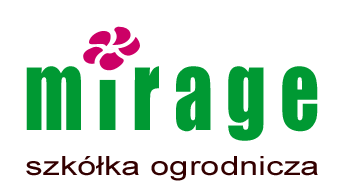
<style>
.page{position:relative;width:339px;height:188px;background:#ffffff}
.page>*{position:absolute;margin:0}
.t1{font:96.6px "Impact";color:#009933;scale:0.8 1}
.t2{font:26.4px "ArialMT";color:#330000;scale:1.31 1}
</style>
<div class="page">
<p class="t1" style="left:26px;top:53px;width:292px;height:88px">m i r a g e</p>
<p class="t2" style="left:26px;top:156px;width:292px;height:25px">szkółka ogrodnicza</p>
</div>
